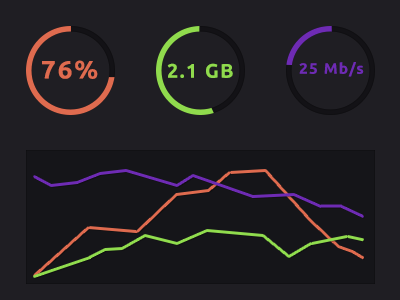
<style>
.page{position:relative;width:400px;height:300px;background:#1f1e23}
.page>*{position:absolute;margin:0}
.t1{font:25.3px "Ubuntu-Bold";letter-spacing:0.075em;color:#df6b4f}
.t2{font:19.7px "Ubuntu-Bold";letter-spacing:0.075em;color:#90db4d}
.t3{font:15px "Ubuntu-Bold";letter-spacing:0.075em;color:#6e2bb4;scale:1.03 1}
</style>
<div class="page">
<p class="t1" style="left:42px;top:60px;width:56px;height:19px">76%</p>
<p class="t2" style="left:167px;top:63px;width:66px;height:15px">2.1 GB</p>
<p class="t3" style="left:299px;top:62px;width:65px;height:15px">25 Mb/s</p>
</div>
